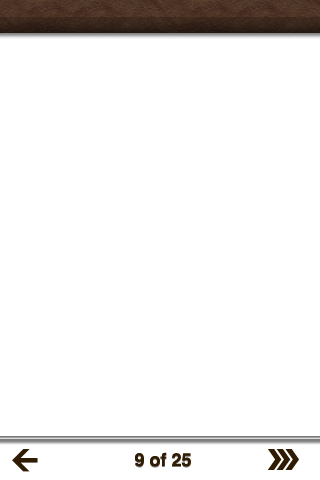
<style>
.page{position:relative;width:320px;height:480px;background:#ffffff}
.page>*{position:absolute;margin:0}
.t1{font:18px "Helvetica-Bold";color:#301b03}
</style>
<div class="page">
<p class="t1" style="left:135px;top:452px;width:56px;height:15px">9 of 25</p>
</div>
